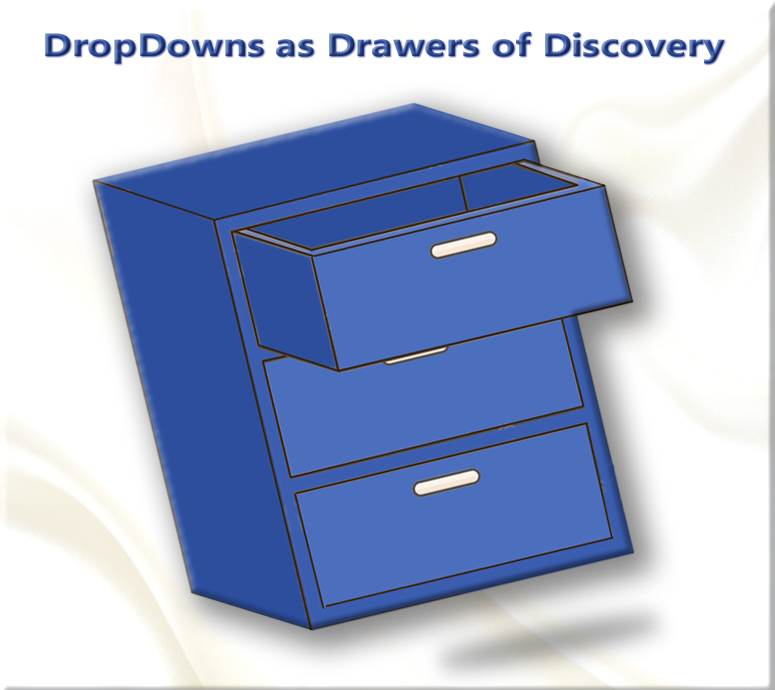
<style>
.page{position:relative;width:775px;height:690px;background:#ffffff}
.page>*{position:absolute;margin:0}
.t1{font:32.3px "NirmalaText-Bold";scale:1.24 1}
</style>
<div class="page">
<p class="t1" style="left:45px;top:31px;width:680px;height:33px">DropDowns as Drawers of Discovery</p>
</div>
